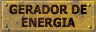
<style>
.page{position:relative;width:96px;height:32px}
.page>*{position:absolute;margin:0}
.t1{font:12.4px/13px "Tahoma-Bold";text-transform:uppercase;scale:0.94 1}
</style>
<div class="page">
<p class="t1" style="left:9px;top:4px;width:78px;height:24px;text-align:center">GERADOR DE<br>ENERGIA</p>
</div>
